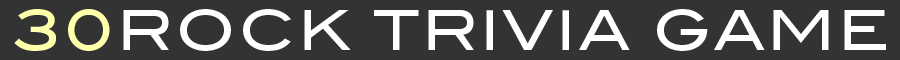
<style>
.page{position:relative;width:900px;height:60px;background:#333333}
.page>*{position:absolute;margin:0}
.t1{font:55px "BlairITCStd";letter-spacing:0.05em;color:#ffffff;text-transform:uppercase}
.t2{font:55px "BlairITCStd";letter-spacing:0.05em;color:#ffffac;text-transform:uppercase}
</style>
<div class="page">
<p class="t1" style="left:14px;top:9px;width:872px;height:42px"><span class="t2">30</span>ROCK TRIVIA GAME</p>
</div>
